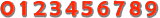
<style>
.page{position:relative;width:160px;height:18px;background:#ffffff}
.page>*{position:absolute;margin:0}
.t1{font:24px "BerlinSansFB-Reg";letter-spacing:0.05em;color:#ff2906}
</style>
<div class="page">
<p class="t1" style="left:0px;top:1px;width:14px;height:15px">0</p>
<p class="t1" style="left:20px;top:0px;width:6px;height:16px">1</p>
<p class="t1" style="left:33px;top:1px;width:12px;height:15px">2</p>
<p class="t1" style="left:49px;top:1px;width:11px;height:15px">3</p>
<p class="t1" style="left:65px;top:1px;width:12px;height:15px">4</p>
<p class="t1" style="left:81px;top:1px;width:11px;height:15px">5</p>
<p class="t1" style="left:97px;top:1px;width:12px;height:15px">6</p>
<p class="t1" style="left:113px;top:0px;width:11px;height:16px">7</p>
<p class="t1" style="left:129px;top:1px;width:11px;height:15px">8</p>
<p class="t1" style="left:145px;top:1px;width:12px;height:15px">9</p>
</div>
